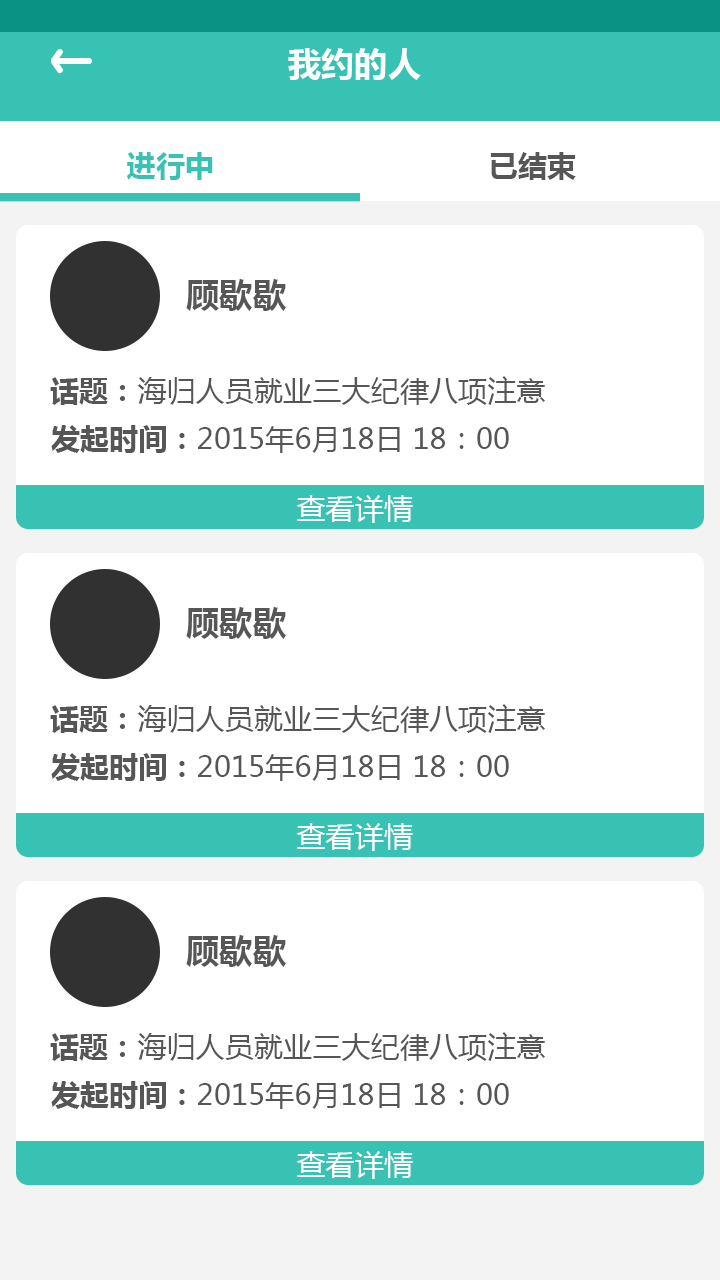
<style>
.page{position:relative;width:720px;height:1280px;background:#ffffff}
.page>*{position:absolute;margin:0}
.t1{font:33.3px "MicrosoftYaHei-Bold";color:#fefefe}
.t2{font:29.2px "MicrosoftYaHei-Bold";color:#38c2b3}
.t3{font:29.2px "MicrosoftYaHei-Bold";color:#565656}
.t4{font:33.3px "MicrosoftYaHei-Bold";color:#565656}
.t5{font:29.2px "MicrosoftYaHei";color:#565656}
.t6{font:29.2px "MicrosoftYaHei";color:#ffffff}
</style>
<div class="page">
<p class="t1" style="left:288px;top:48px;width:133px;height:32px">我约的人</p>
<p class="t2" style="left:127px;top:152px;width:86px;height:28px">进行中</p>
<p class="t3" style="left:490px;top:152px;width:86px;height:28px">已结束</p>
<p class="t4" style="left:186px;top:279px;width:100px;height:32px">顾歇歇</p>
<p class="t5" style="left:50px;top:376px;width:495px;height:29px"><span class="t3">话题：</span>海归人员就业三大纪律八项注意</p>
<p class="t5" style="left:51px;top:425px;width:458px;height:28px"><span class="t3">发起时间：</span>2015年6月18日 18：00</p>
<p class="t6" style="left:296px;top:495px;width:117px;height:28px">查看详情</p>
<p class="t4" style="left:186px;top:607px;width:100px;height:32px">顾歇歇</p>
<p class="t5" style="left:50px;top:704px;width:495px;height:29px"><span class="t3">话题：</span>海归人员就业三大纪律八项注意</p>
<p class="t5" style="left:51px;top:753px;width:458px;height:28px"><span class="t3">发起时间：</span>2015年6月18日 18：00</p>
<p class="t6" style="left:296px;top:823px;width:117px;height:28px">查看详情</p>
<p class="t4" style="left:186px;top:935px;width:100px;height:32px">顾歇歇</p>
<p class="t5" style="left:50px;top:1032px;width:495px;height:29px"><span class="t3">话题：</span>海归人员就业三大纪律八项注意</p>
<p class="t5" style="left:51px;top:1081px;width:458px;height:28px"><span class="t3">发起时间：</span>2015年6月18日 18：00</p>
<p class="t6" style="left:296px;top:1151px;width:117px;height:28px">查看详情</p>
</div>
